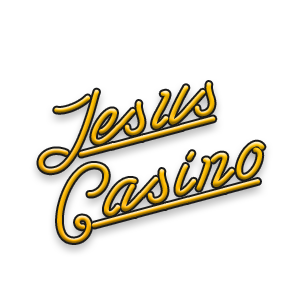
<style>
.page{position:relative;width:300px;height:300px;background:#ffffff}
.page>*{position:absolute;margin:0}
.t1{font:90.2px "LasEnterPersonalUseOnly"}
</style>
<div class="page">
<p class="t1" style="left:38px;top:82px;width:178px;height:92px;rotate:-15deg">Jesus</p>
<p class="t1" style="left:57px;top:141px;width:208px;height:102px;rotate:-15deg">Casino</p>
</div>
